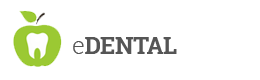
<style>
.page{position:relative;width:260px;height:80px;background:#ffffff}
.page>*{position:absolute;margin:0}
.t1{font:24px "RobotoSlab-Bold";letter-spacing:-0.025em;color:#555555}
.t2{font:48px "OpenSans-Extrabold";letter-spacing:-0.025em;color:#555555}
.t3{font:24px "RobotoSlab-Light";letter-spacing:-0.025em;color:#555555}
</style>
<div class="page">
<p class="t1" style="left:73px;top:37px;width:104px;height:17px"><span class="t2"><br></span><span class="t3">e</span>DENTAL</p>
</div>
